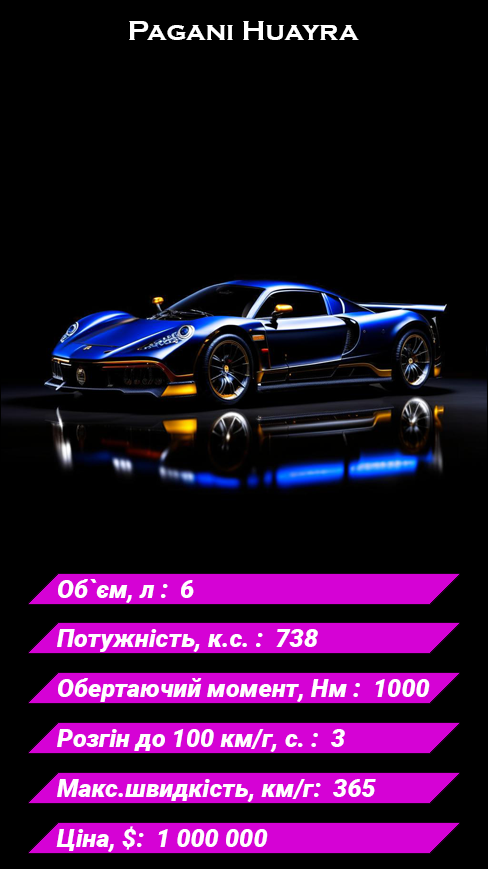
<style>
.page{position:relative;width:488px;height:869px;background:#000000}
.page>*{position:absolute;margin:0}
.t1{font:28px "CopperplateGothic-Bold";color:#ffffff}
.t2{font:25px "Roboto-BlackItalic";color:#ffffff}
</style>
<div class="page">
<p class="t1" style="left:129px;top:21px;width:230px;height:19px">Pagani Huayra</p>
<p class="t2" style="left:58px;top:579px;width:136px;height:24px">Об`єм, л :  6</p>
<p class="t2" style="left:57px;top:629px;width:261px;height:23px">Потужність, к.с. :  738</p>
<p class="t2" style="left:58px;top:678px;width:372px;height:24px">Обертаючий момент, Нм :  1000</p>
<p class="t2" style="left:57px;top:729px;width:288px;height:23px">Розгін до 100 км/г, с. :  3</p>
<p class="t2" style="left:57px;top:779px;width:319px;height:23px">Макс.швидкість, км/г:  365</p>
<p class="t2" style="left:56px;top:826px;width:212px;height:26px">Ціна, $:  1 000 000</p>
</div>
